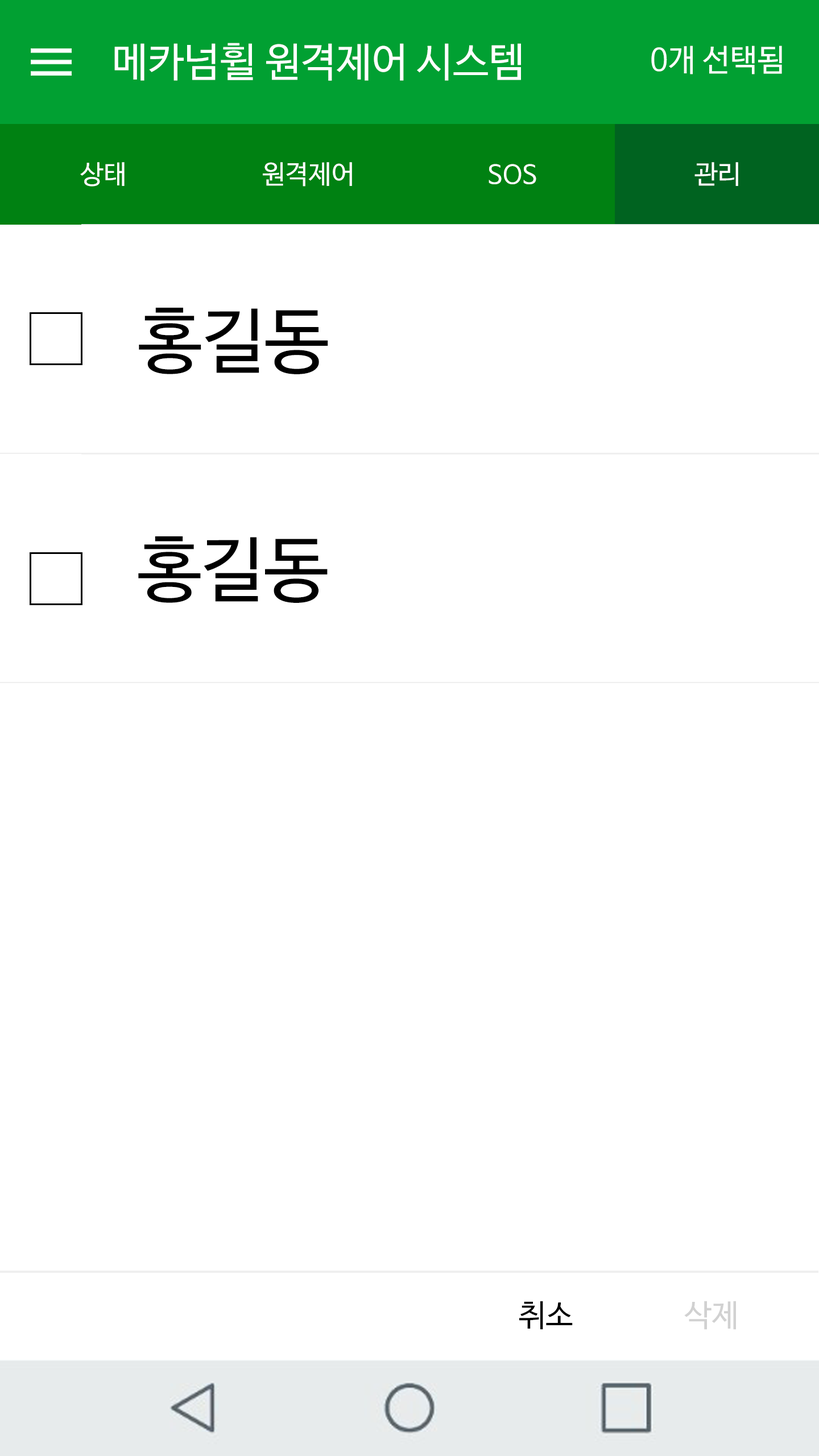
<style>
.page{position:relative;width:819px;height:1456px;background:#ffffff}
.page>*{position:absolute;margin:0}
.t1{font:40.3px "NanumBarunGothicOTF";color:#ffffff}
.t2{font:30.8px "NanumBarunGothicOTF";color:#ffffff}
.t3{font:26.1px "NanumBarunGothicOTF";color:#ffffff}
.t4{font:71.1px "NanumBarunGothicOTF";color:#000000}
.t5{font:30.8px "NanumBarunGothicOTF";color:#000000}
.t6{font:30.8px "NanumBarunGothicOTF";color:#d1d1d1}
</style>
<div class="page">
<p class="t1" style="left:114px;top:43px;width:407px;height:38px">메카넘휠 원격제어 시스템</p>
<p class="t2" style="left:651px;top:45px;width:131px;height:30px">0개 선택됨</p>
<p class="t3" style="left:80px;top:162px;width:45px;height:25px">상태</p>
<p class="t3" style="left:263px;top:162px;width:89px;height:25px">원격제어</p>
<p class="t3" style="left:489px;top:164px;width:47px;height:20px">SOS</p>
<p class="t3" style="left:694px;top:162px;width:44px;height:24px">관리</p>
<p class="t4" style="left:139px;top:308px;width:189px;height:66px">홍길동</p>
<p class="t4" style="left:138px;top:536px;width:190px;height:67px">홍길동</p>
<p class="t5" style="left:519px;top:1301px;width:54px;height:29px">취소</p>
<p class="t6" style="left:684px;top:1301px;width:52px;height:29px">삭제</p>
</div>
